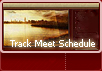
<style>
.page{position:relative;width:102px;height:71px}
.page>*{position:absolute;margin:0}
.t1{font:9px "Tahoma";color:#ffffff}
</style>
<div class="page">
<p class="t1" style="left:10px;top:39px;width:85px;height:8px">Track Meet Schedule</p>
</div>
